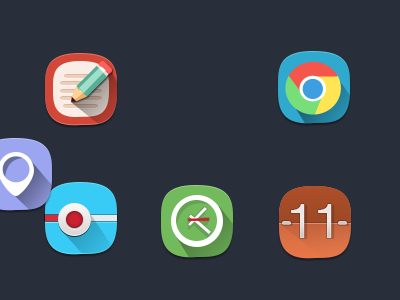
<style>
.page{position:relative;width:400px;height:300px;background:#282e3a}
.page>*{position:absolute;margin:0}
.t1{font:47.6px "HelveticaNeue";color:#ece6e6}
</style>
<div class="page">
<p class="t1" style="left:291px;top:204px;width:41px;height:34px">11</p>
</div>
